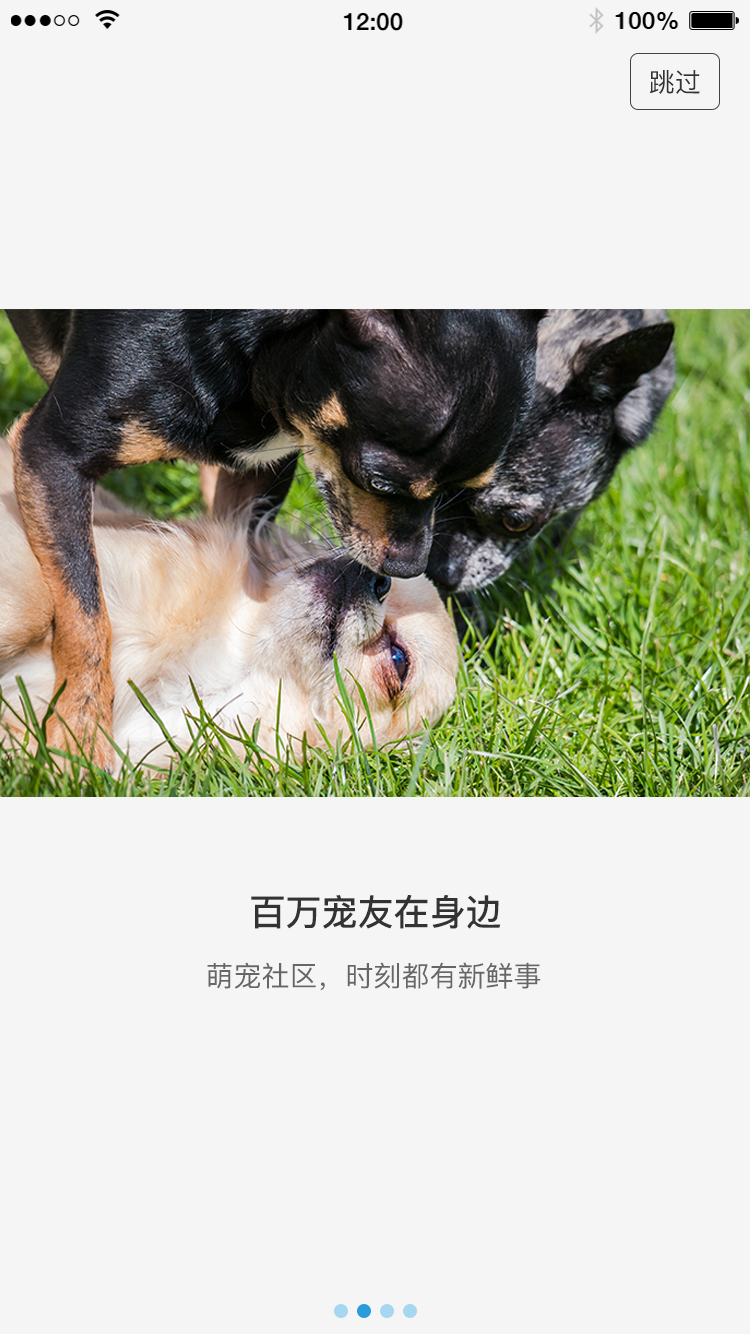
<style>
.page{position:relative;width:750px;height:1334px;background:#f5f5f5}
.page>*{position:absolute;margin:0}
.t1{font:26px "PingFangSC-Regular";color:#333333}
.t2{font:36px "PingFangSC-Medium";color:#333333}
.t3{font:28px "PingFangSC-Regular";color:#666666}
</style>
<div class="page">
<p class="t1" style="left:649px;top:70px;width:51px;height:24px">跳过</p>
<p class="t2" style="left:251px;top:894px;width:250px;height:35px">百万宠友在身边</p>
<p class="t3" style="left:207px;top:962px;width:334px;height:29px">萌宠社区，时刻都有新鲜事</p>
</div>
